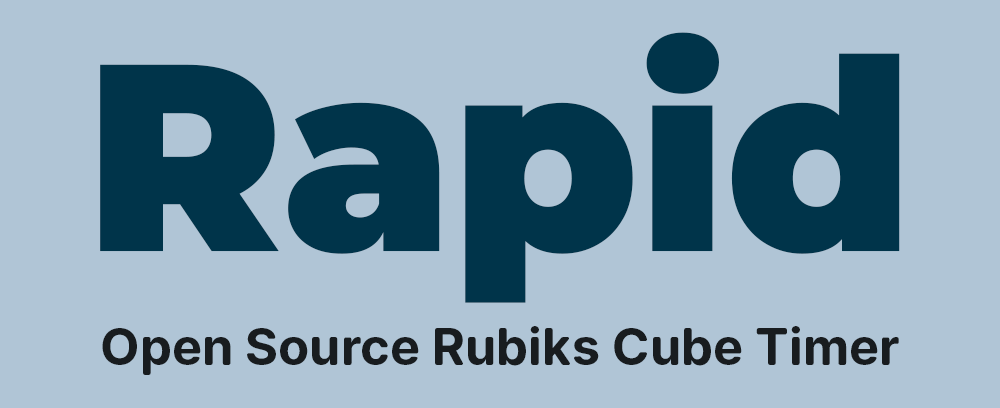
<style>
.page{position:relative;width:1000px;height:408px;background:#b0c5d6}
.page>*{position:absolute;margin:0}
.t1{font:266.1px "Montserrat-Black";color:#00344a}
.t2{font:49.3px "OpenRunde-Bold";color:#181c1f}
</style>
<div class="page">
<p class="t1" style="left:100px;top:32px;width:800px;height:271px">Rapid</p>
<p class="t2" style="left:102px;top:326px;width:797px;height:49px">Open Source Rubiks Cube Timer</p>
</div>
